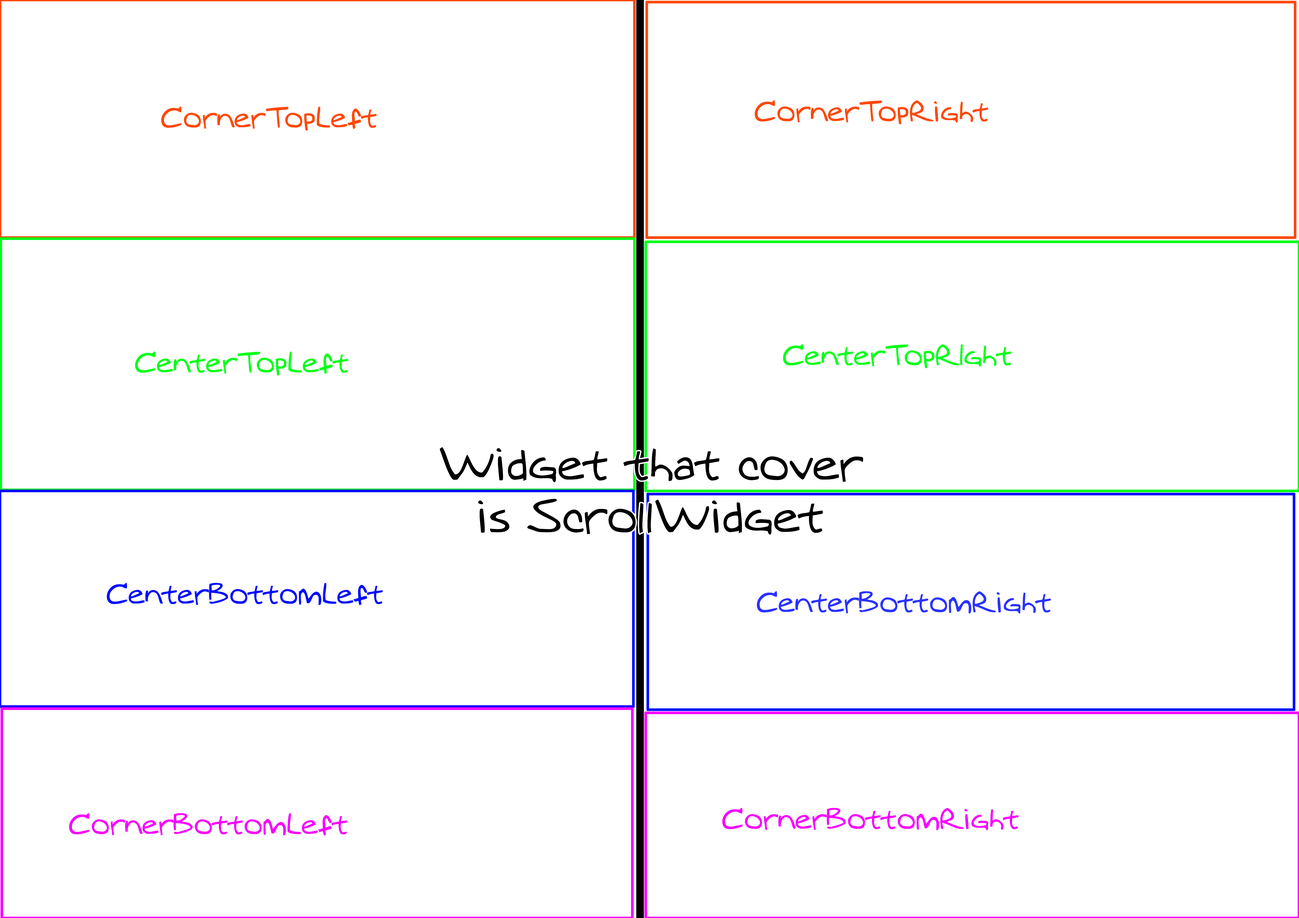
<style>
.page{position:relative;width:1299px;height:918px;background:#ffffff}
.page>*{position:absolute;margin:0}
.t1{font:27.3px "MTOaugie-Regular";color:#ff4800}
.t2{font:27.3px "MTOaugie-Regular";color:#00ff18}
.t3{font:43.6px "MTOaugie-Regular";color:#000000}
.t4{font:27.3px "MTOaugie-Regular";color:#000cff}
.t5{font:27.3px "MTOaugie-Regular";color:#2a32ff}
.t6{font:27.3px "MTOaugie-Regular";color:#f600ff}
</style>
<div class="page">
<p class="t1" style="left:754px;top:100px;width:234px;height:24px">CornerTopRight</p>
<p class="t1" style="left:161px;top:107px;width:216px;height:24px">CornerTopLeft</p>
<p class="t2" style="left:135px;top:352px;width:213px;height:24px">CenterTopLeft</p>
<p class="t2" style="left:783px;top:344px;width:228px;height:24px">CenterTopRIght</p>
<p class="t3" style="left:439px;top:447px;width:424px;height:88px;text-align:center">Widget that cover is ScrollWidget</p>
<p class="t4" style="left:107px;top:583px;width:276px;height:22px">CenterBottomLeft</p>
<p class="t5" style="left:756px;top:591px;width:294px;height:23px">CenterBottomRight</p>
<p class="t6" style="left:722px;top:808px;width:296px;height:23px">CornerBottomRight</p>
<p class="t6" style="left:69px;top:813px;width:278px;height:23px">CornerBottomLeft</p>
</div>
